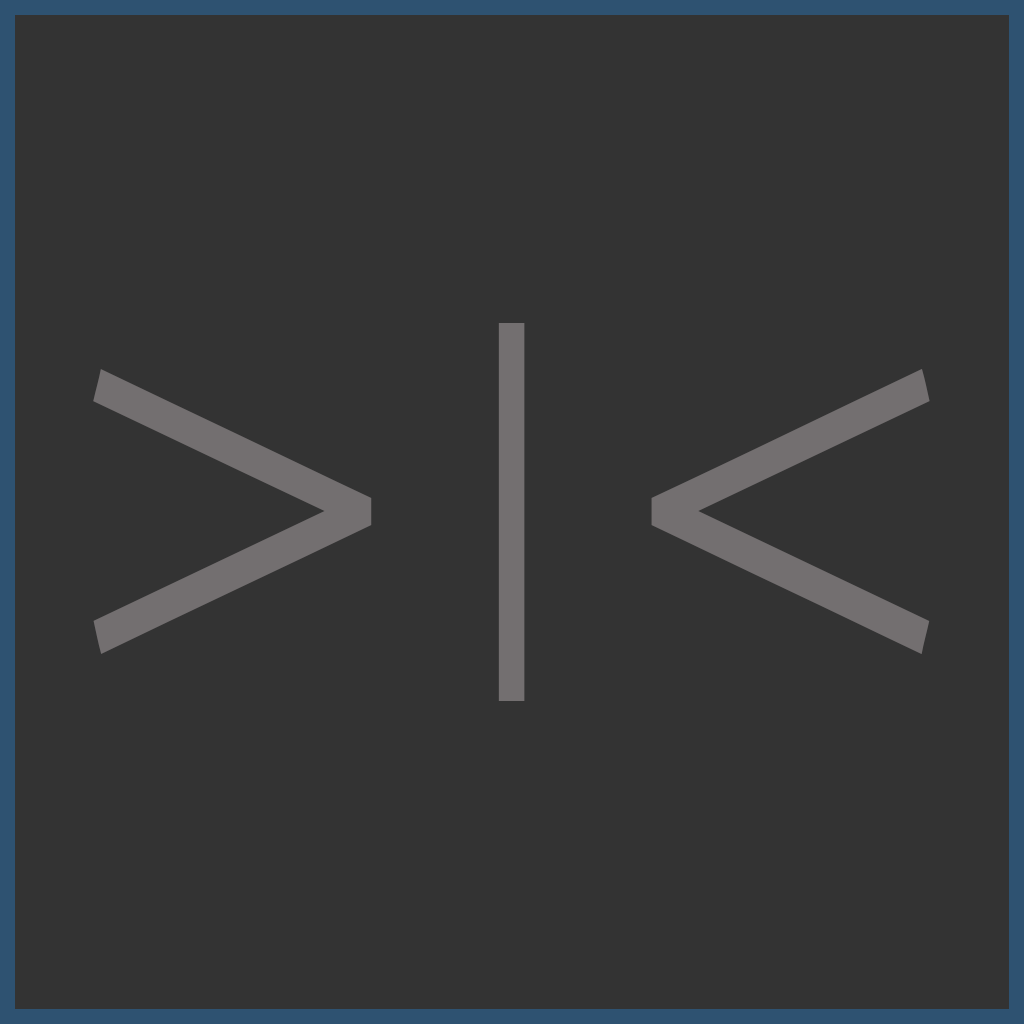
<style>
.page{position:relative;width:1024px;height:1024px;background:#333333}
.page>*{position:absolute;margin:0}
.t1{font:675px "Microsoft-Yi-Baiti";color:#736f70}
</style>
<div class="page">
<p class="t1" style="left:93px;top:323px;width:837px;height:378px">&gt;|&lt;</p>
</div>
